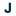
<style>
.page{position:relative;width:16px;height:16px;background:#ffffff}
.page>*{position:absolute;margin:0}
.t1{font:14px "Arial-BoldMT";color:#03333b}
</style>
<div class="page">
<p class="t1" style="left:4px;top:2px;width:7px;height:11px">J</p>
</div>
